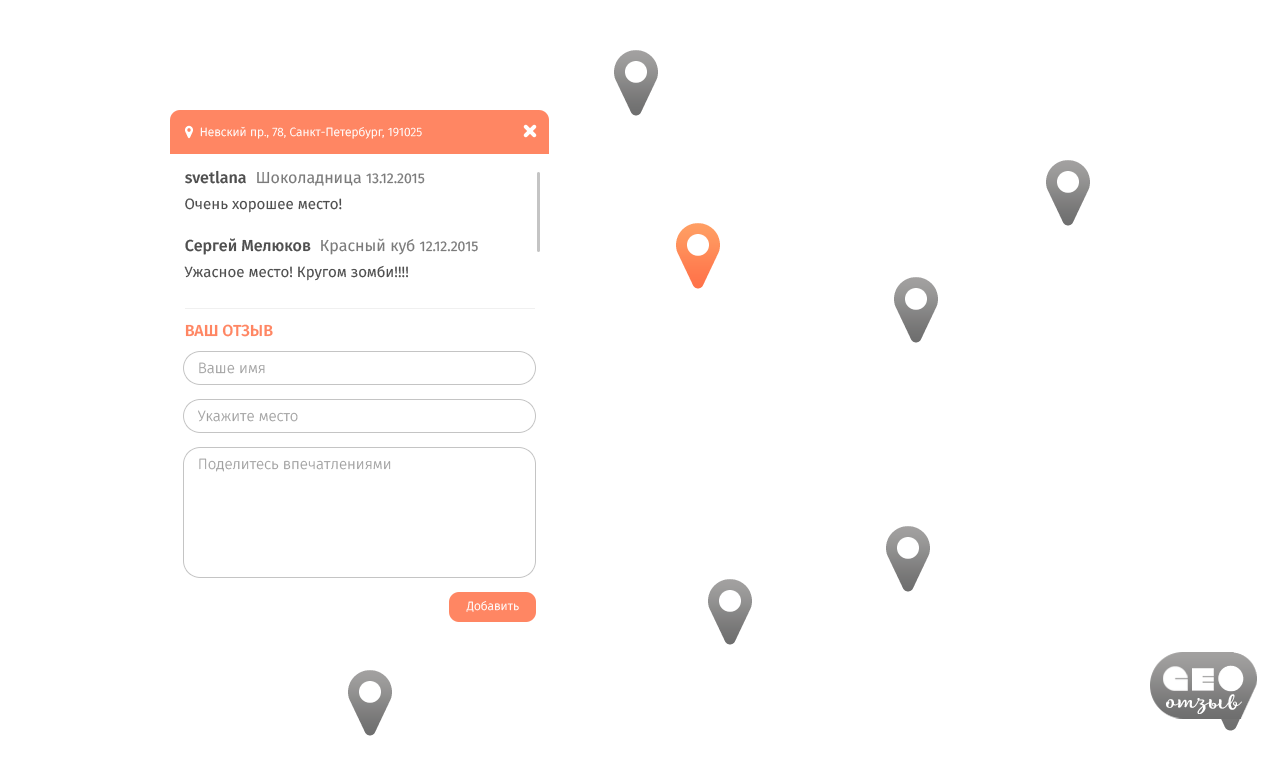
<style>
.page{position:relative;width:1280px;height:768px;background:#ffffff}
.page>*{position:absolute;margin:0}
.t1{font:12px "FiraSans-Light";color:#ffffff}
.t2{font:16px "FiraSans-Medium";color:#4f4f4f}
.t3{font:16px "FiraSans-Regular";color:#7b7b7b}
.t4{font:14px "FiraSans-Regular";color:#7b7b7b}
.t5{font:15px "FiraSans-Regular";color:#4f4f4f}
.t6{font:16px "FiraSans-Medium";color:#ff8663;text-transform:uppercase}
.t7{font:15px "FiraSans-Light";color:#9f9f9f}
</style>
<div class="page">
<p class="t1" style="left:200px;top:126px;width:222px;height:13px">Невский пр., 78, Санкт-Петербург, 191025</p>
<p class="t2" style="left:185px;top:170px;width:61px;height:14px">svetlana</p>
<p class="t3" style="left:257px;top:171px;width:168px;height:15px">Шоколадница <span class="t4">13.12.2015</span></p>
<p class="t5" style="left:185px;top:198px;width:157px;height:15px">Очень хорошее место!</p>
<p class="t2" style="left:185px;top:238px;width:126px;height:17px">Сергей Мелюков</p>
<p class="t3" style="left:321px;top:238px;width:157px;height:17px">Красный куб <span class="t4">12.12.2015</span></p>
<p class="t5" style="left:184px;top:265px;width:224px;height:16px">Ужасное место! Кругом зомби!!!!</p>
<p class="t6" style="left:185px;top:324px;width:88px;height:13px">ВАШ ОТЗЫВ</p>
<p class="t7" style="left:199px;top:362px;width:66px;height:12px">Ваше имя</p>
<p class="t7" style="left:198px;top:410px;width:100px;height:12px">Укажите место</p>
<p class="t7" style="left:199px;top:458px;width:192px;height:14px">Поделитесь впечатлениями</p>
<p class="t1" style="left:466px;top:601px;width:53px;height:11px">Добавить</p>
</div>
